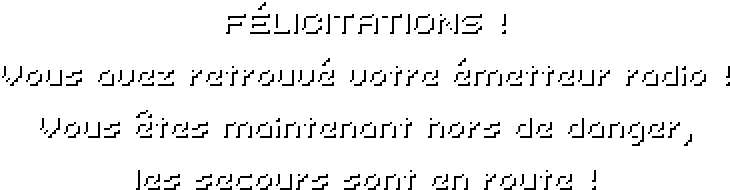
<style>
.page{position:relative;width:730px;height:190px;background:#ffffff}
.page>*{position:absolute;margin:0}
.t1{font:32px/52px "Uni0553"}
</style>
<div class="page">
<p class="t1" style="left:2px;top:2px;width:728px;height:188px;text-align:center">FÉLICITATIONS !<br>Vous avez retrouvé votre émetteur radio !<br>Vous êtes maintenant hors de danger,<br>les secours sont en route !</p>
</div>
